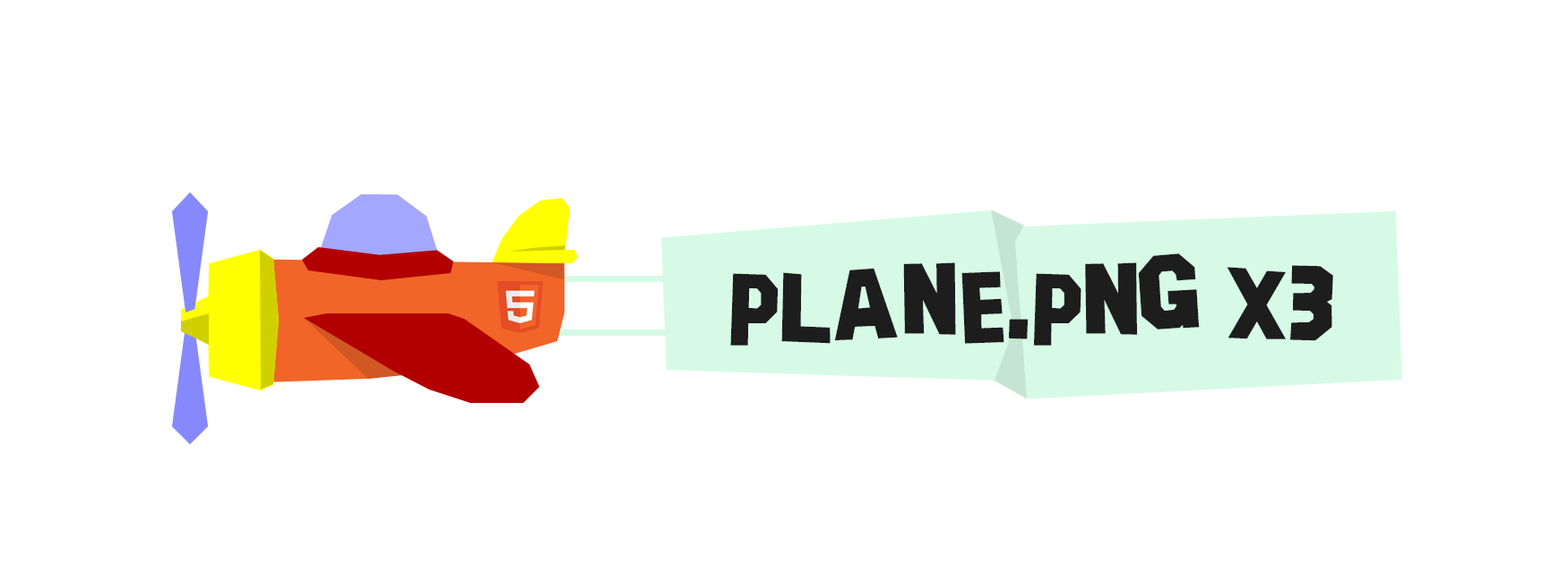
<style>
.page{position:relative;width:1568px;height:582px;background:#ffffff}
.page>*{position:absolute;margin:0}
.t1{font:112px "HollywoodCapital";color:#1d1d1d}
</style>
<div class="page">
<p class="t1" style="left:730px;top:254px;width:603px;height:92px">plane.png x3</p>
</div>
